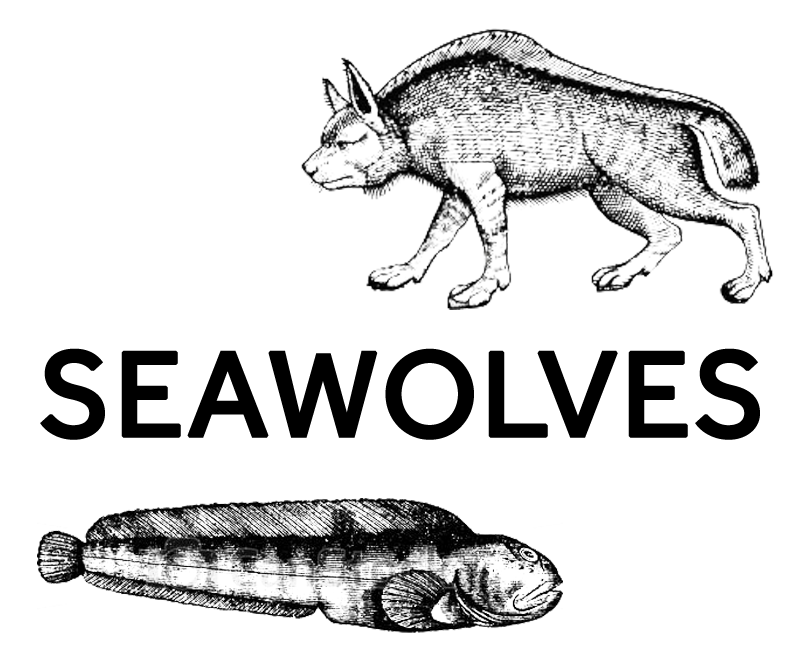
<style>
.page{position:relative;width:800px;height:660px;background:#ffffff}
.page>*{position:absolute;margin:0}
.t1{font:125px "Effra";color:#000000;text-transform:uppercase;font-weight:bold}
</style>
<div class="page">
<p class="t1" style="left:40px;top:348px;width:720px;height:92px">Seawolves</p>
</div>
